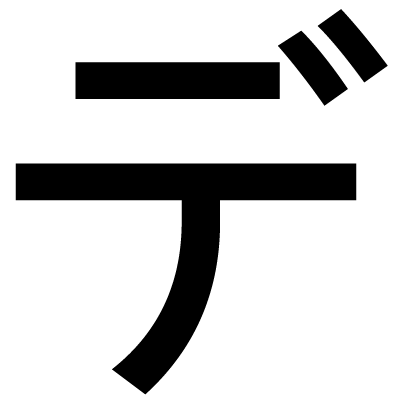
<style>
.page{position:relative;width:400px;height:400px;background:#ffffff}
.page>*{position:absolute;margin:0}
.t1{font:424.8px "MS-PGothic";color:#000000}
</style>
<div class="page">
<p class="t1" style="left:15px;top:9px;width:373px;height:386px">デ</p>
</div>
